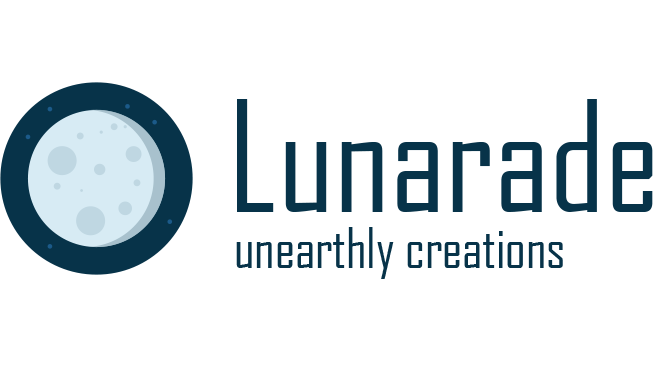
<style>
.page{position:relative;width:654px;height:367px;background:#ffffff}
.page>*{position:absolute;margin:0}
.t1{font:147.7px "AgencyFB-Reg";color:#073349}
.t2{font:53.5px "AgencyFB-Reg";color:#073349}
</style>
<div class="page">
<p class="t1" style="left:237px;top:99px;width:416px;height:113px">Lunarade</p>
<p class="t2" style="left:236px;top:227px;width:327px;height:52px">unearthly creations</p>
</div>
